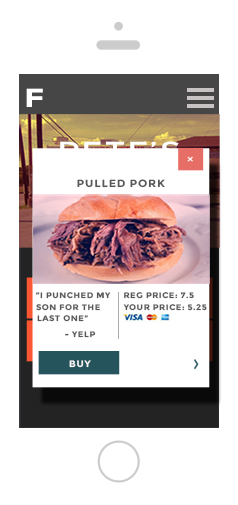
<style>
.page{position:relative;width:238px;height:505px;background:#ffffff}
.page>*{position:absolute;margin:0}
.t1{font:26px "Montserrat-Bold";letter-spacing:0.06em;color:#ffffff;text-transform:uppercase;scale:1.28 1}
.t2{font:26px "Montserrat-Regular";letter-spacing:0.06em;color:#ffffff;text-transform:uppercase;scale:1.28 1}
.t3{font:10.6px "Montserrat-Bold";letter-spacing:0.06em;color:#595858;text-transform:uppercase;scale:1.07 1}
.t4{font:8px "Montserrat-Bold";letter-spacing:0.06em;color:#595858;text-transform:uppercase;scale:1.07 1}
.t5{font:9.2px "Montserrat-Bold";letter-spacing:0.06em;color:#ffffff;text-transform:uppercase;scale:1.07 1}
</style>
<div class="page">
<p class="t1" style="left:26px;top:88px;width:17px;height:19px">f</p>
<p class="t2" style="left:60px;top:141px;width:120px;height:20px">pete’s</p>
<p class="t3" style="left:77px;top:179px;width:88px;height:9px">pulled pork</p>
<p class="t4" style="left:35px;top:292px;width:76px;height:7px">“i punched my</p>
<p class="t4" style="left:124px;top:292px;width:70px;height:7px">reg price: 7.5</p>
<p class="t4" style="left:36px;top:304px;width:64px;height:7px">son for the</p>
<p class="t4" style="left:123px;top:304px;width:84px;height:7px">your price: 5.25</p>
<p class="t4" style="left:37px;top:315px;width:51px;height:7px">last one”</p>
<p class="t4" style="left:65px;top:331px;width:31px;height:7px">- yelp</p>
<p class="t5" style="left:69px;top:360px;width:22px;height:8px">buy</p>
</div>
